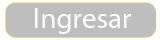
<style>
.page{position:relative;width:160px;height:40px;background:#bfbebe}
.page>*{position:absolute;margin:0}
.t1{font:29.2px "MyriadPro-Regular";color:#fefffe}
</style>
<div class="page">
<p class="t1" style="left:35px;top:8px;width:96px;height:26px">Ingresar</p>
</div>
